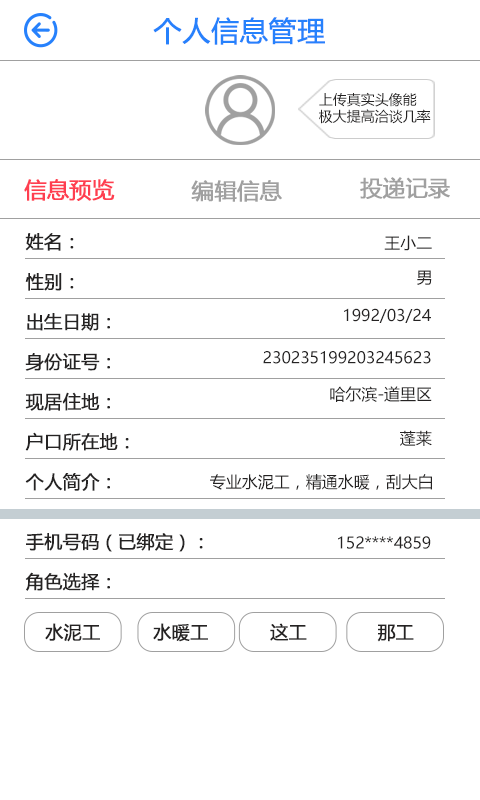
<style>
.page{position:relative;width:480px;height:800px;background:#ffffff}
.page>*{position:absolute;margin:0}
.t1{font:28px "MicrosoftYaHei";color:#2681fc;font-weight:bold}
.t2{font:14px "MicrosoftYaHei";color:#252323}
.t3{font:22px "MicrosoftYaHei";color:#ff3e50;font-weight:bold}
.t4{font:22px "MicrosoftYaHei";color:#a0a0a0;font-weight:bold}
.t5{font:18px "MicrosoftYaHei";color:#252323;font-weight:bold}
.t6{font:16px "MicrosoftYaHei";color:#252323}
</style>
<div class="page">
<p class="t1" style="left:153px;top:17px;width:172px;height:28px">个人信息管理</p>
<p class="t2" style="left:319px;top:92px;width:112px;height:32px">上传真实头像能<br>极大提高洽谈几率</p>
<p class="t3" style="left:24px;top:179px;width:91px;height:22px">信息预览</p>
<p class="t4" style="left:191px;top:180px;width:91px;height:22px">编辑信息</p>
<p class="t4" style="left:360px;top:177px;width:90px;height:22px">投递记录</p>
<p class="t5" style="left:25px;top:233px;width:49px;height:18px">姓名：</p>
<p class="t6" style="left:384px;top:235px;width:48px;height:16px">王小二</p>
<p class="t6" style="left:417px;top:270px;width:15px;height:15px">男</p>
<p class="t5" style="left:25px;top:273px;width:49px;height:18px">性别：</p>
<p class="t5" style="left:27px;top:313px;width:83px;height:18px">出生日期：</p>
<p class="t6" style="left:344px;top:308px;width:87px;height:15px">1992/03/24</p>
<p class="t5" style="left:25px;top:353px;width:85px;height:18px">身份证号：</p>
<p class="t6" style="left:263px;top:351px;width:168px;height:13px">230235199203245623</p>
<p class="t6" style="left:330px;top:386px;width:102px;height:16px">哈尔滨-道里区</p>
<p class="t5" style="left:25px;top:392px;width:85px;height:19px">现居住地：</p>
<p class="t5" style="left:25px;top:432px;width:104px;height:19px">户口所在地：</p>
<p class="t6" style="left:400px;top:430px;width:32px;height:16px">蓬莱</p>
<p class="t5" style="left:25px;top:473px;width:85px;height:18px">个人简介：</p>
<p class="t6" style="left:210px;top:474px;width:222px;height:16px">专业水泥工，精通水暖，刮大白</p>
<p class="t5" style="left:26px;top:533px;width:177px;height:19px">手机号码（已绑定）：</p>
<p class="t6" style="left:338px;top:536px;width:93px;height:13px">152****4859</p>
<p class="t5" style="left:25px;top:572px;width:85px;height:19px">角色选择：</p>
<p class="t5" style="left:45px;top:623px;width:55px;height:19px">水泥工</p>
<p class="t5" style="left:153px;top:623px;width:55px;height:19px">水暖工</p>
<p class="t5" style="left:270px;top:623px;width:37px;height:18px">这工</p>
<p class="t5" style="left:377px;top:624px;width:37px;height:18px">那工</p>
</div>
